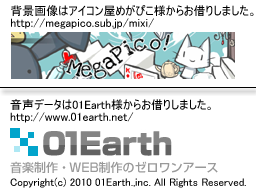
<style>
.page{position:relative;width:256px;height:192px;background:#ffffff}
.page>*{position:absolute;margin:0}
.t1{font:12px/12px "MS-UIGothic";color:#000000}
.t2{font:11px "MS-UIGothic";color:#000000}
</style>
<div class="page">
<p class="t1" style="left:11px;top:5px;width:243px;height:24px">背景画像はアイコン屋めがぴこ様からお借りしました。<br>http://megapico.sub.jp/mixi/</p>
<p class="t1" style="left:10px;top:99px;width:201px;height:24px">音声データは01Earth様からお借りしました。<br>http://www.01earth.net/</p>
<p class="t2" style="left:10px;top:177px;width:236px;height:11px">Copyright(c) 2010 01Earth.,inc. All Rights Reserved.</p>
</div>
